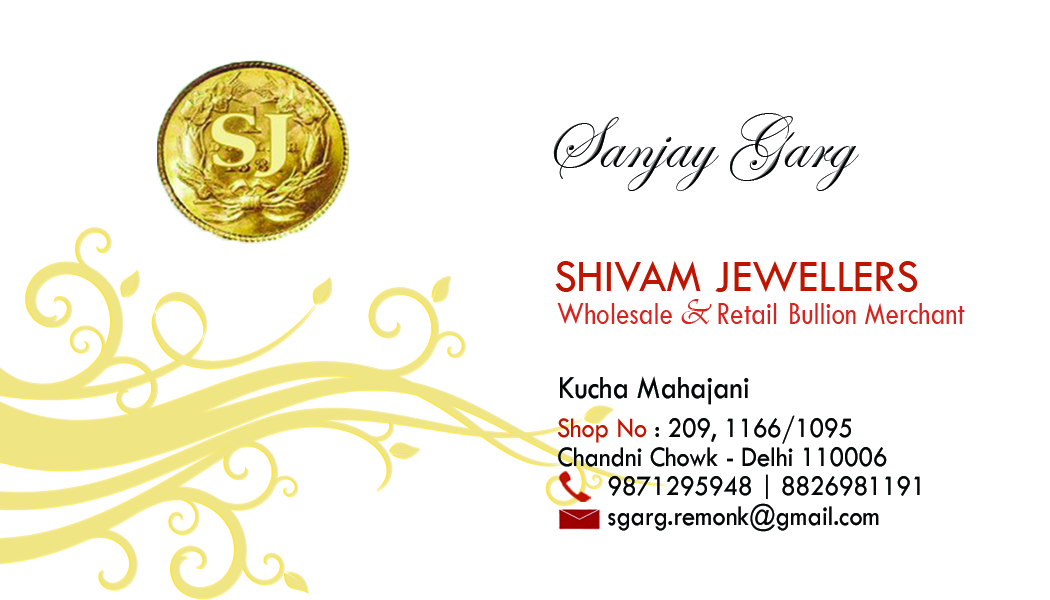
<style>
.page{position:relative;width:1050px;height:600px;background:#ffffff}
.page>*{position:absolute;margin:0}
.t1{font:75px "EdwardianScriptITC";color:#060808}
.t2{font:45.8px "TwCenMT-Regular";color:#bd1500}
.t3{font:33.3px "TwCenMT-Regular";color:#d62521;scale:0.82 1}
.t4{font:37.5px "Vivaldii";color:#d62521;scale:0.82 1}
.t5{font:33.3px "TwCenMT-Regular";color:#be1500;scale:0.82 1}
.t6{font:33.3px "TwCenMT-Regular";color:#060808;scale:0.9 1}
.t7{font:29.2px/29.2px "TwCenMT-Regular";color:#060808;scale:0.9 1}
.t8{font:29.2px/29.2px "TwCenMT-Regular";color:#be1500;scale:0.9 1}
</style>
<div class="page">
<p class="t1" style="left:553px;top:113px;width:306px;height:78px">Sanjay Garg</p>
<p class="t2" style="left:555px;top:261px;width:363px;height:31px">SHIVAM JEWELLERS</p>
<p class="t3" style="left:557px;top:299px;width:408px;height:26px">Wholesale <span class="t4">&amp; </span>Retail  Bullion Merchant<br><span class="t5"><br>Merchant</span></p>
<p class="t6" style="left:560px;top:376px;width:189px;height:29px">Kucha Mahajani</p>
<p class="t7" style="left:557px;top:415px;width:363px;height:117px"><span class="t8">Shop No</span> : 209, 1166/1095<br>Chandni Chowk - Delhi 110006<br>       9871295948 | 8826981191<br>       sgarg.remonk@gmail.com</p>
</div>
